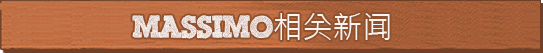
<style>
.page{position:relative;width:543px;height:53px}
.page>*{position:absolute;margin:0}
.t1{font:30px "ScribbleBoxDEMO";color:#f8f3f1}
.t2{font:30px "MicrosoftJhengHeiRegular";color:#f8f3f1}
</style>
<div class="page">
<p class="t1" style="left:132px;top:13px;width:258px;height:27px">Massimo<span class="t2">相关新闻</span></p>
</div>
